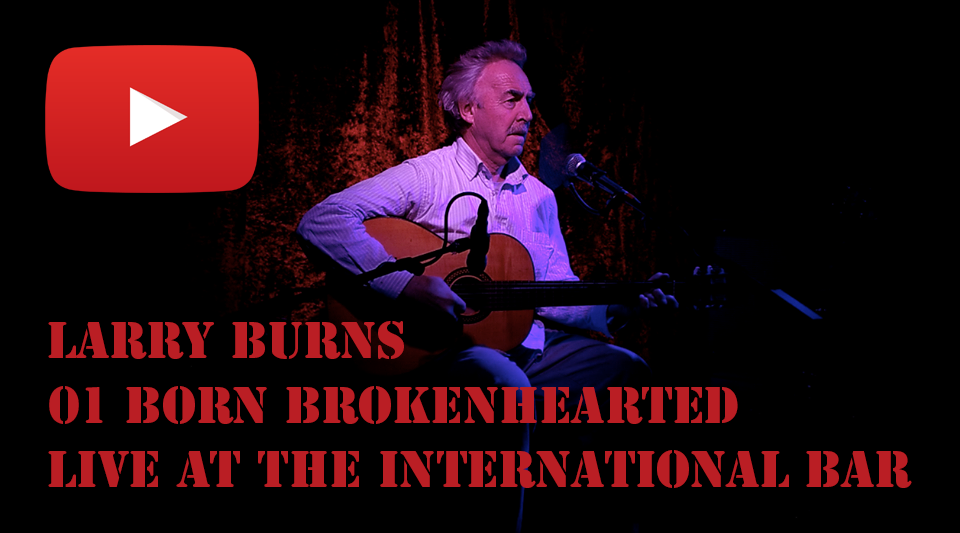
<style>
.page{position:relative;width:960px;height:533px;background:#000000}
.page>*{position:absolute;margin:0}
.t1{font:48px "StencilStd";color:#ba1e24}
</style>
<div class="page">
<p class="t1" style="left:48px;top:321px;width:356px;height:38px">Larry Burns</p>
<p class="t1" style="left:49px;top:386px;width:689px;height:38px">01 Born BrokenHearted</p>
<p class="t1" style="left:48px;top:450px;width:864px;height:38px">Live At The International Bar</p>
</div>
